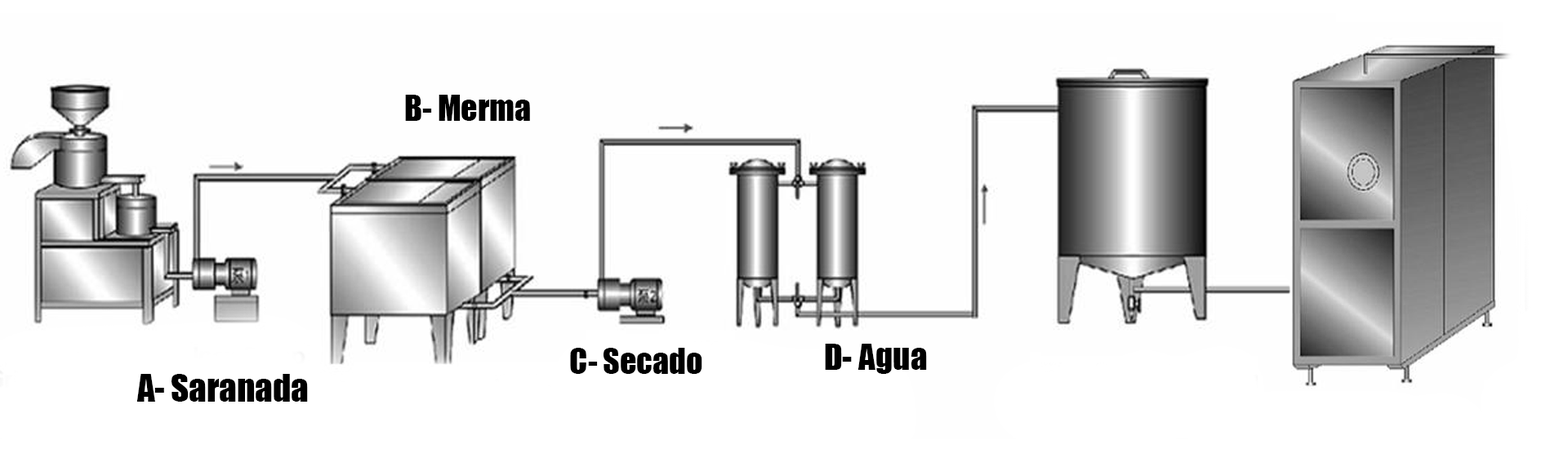
<style>
.page{position:relative;width:1568px;height:449px;background:#fefefe}
.page>*{position:absolute;margin:0}
.t1{font:32.7px "Impact";color:#000000}
.t2{font:33.8px "Impact";color:#000000}
.t3{font:34.8px "Impact";color:#000000}
</style>
<div class="page">
<p class="t1" style="left:405px;top:95px;width:125px;height:26px">B- Merma</p>
<p class="t1" style="left:570px;top:348px;width:132px;height:26px">C- Secado</p>
<p class="t2" style="left:825px;top:344px;width:102px;height:30px">D- Agua</p>
<p class="t3" style="left:136px;top:374px;width:172px;height:28px">A- Saranada</p>
</div>
